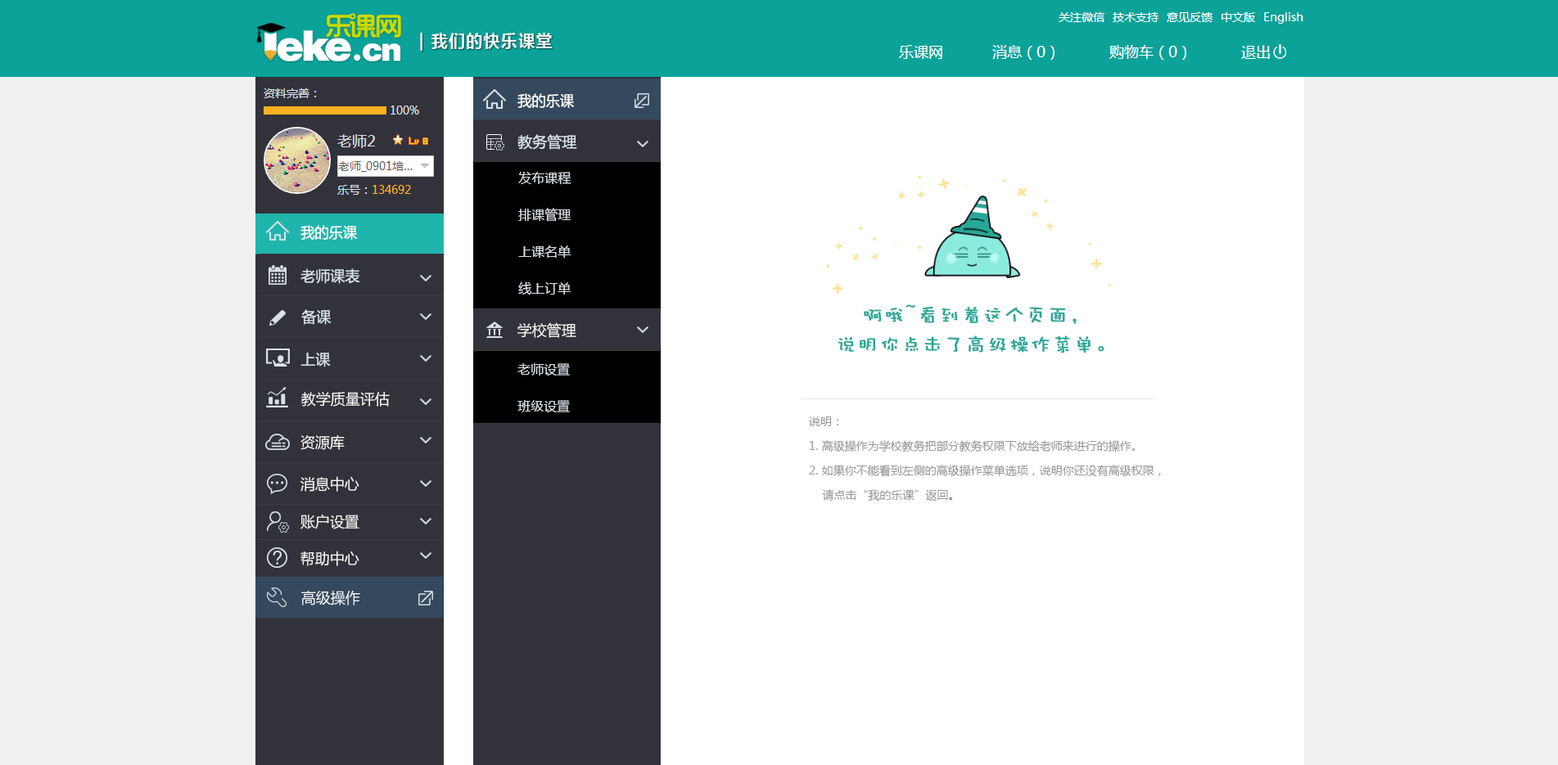
<style>
.page{position:relative;width:1558px;height:765px;background:#ffffff}
.page>*{position:absolute;margin:0}
.t1{font:14.7px "MicrosoftYaHei";color:#ffffff;scale:0.96 1}
.t2{font:14.7px "MicrosoftYaHei";color:#d9e1e8}
.t3{font:13.1px/36.8px "MicrosoftYaHei";color:#d9e1e8}
.t4{font:19.6px/29.5px "DFWaWaW5";letter-spacing:0.075em;color:#2aa798;font-weight:bold}
.t5{font:14.7px "MicrosoftYaHei";color:#fafafa}
.t6{font:11.5px/24.6px "MicrosoftYaHei";color:#999999}
.t7{font:11.5px/24.6px "MicrosoftYaHei";color:#666666}
</style>
<div class="page">
<p class="t1" style="left:517px;top:93px;width:57px;height:15px">我的乐课</p>
<p class="t2" style="left:517px;top:134px;width:60px;height:16px">教务管理</p>
<p class="t3" style="left:518px;top:172px;width:53px;height:123px">发布课程<br>排课管理<br>上课名单<br>线上订单</p>
<p class="t1" style="left:300px;top:225px;width:57px;height:15px">我的乐课</p>
<p class="t2" style="left:300px;top:269px;width:60px;height:15px">老师课表</p>
<p class="t4" style="left:837px;top:305px;width:267px;height:49px;text-align:center">啊哦~看到着这个页面，<br>说明你点击了高级操作菜单。</p>
<p class="t2" style="left:301px;top:309px;width:31px;height:16px">备课</p>
<p class="t5" style="left:517px;top:323px;width:59px;height:15px">学校管理</p>
<p class="t2" style="left:300px;top:353px;width:31px;height:15px">上课</p>
<p class="t3" style="left:517px;top:363px;width:53px;height:50px">老师设置<br>班级设置</p>
<p class="t5" style="left:301px;top:392px;width:89px;height:15px">教学质量评估</p>
<p class="t6" style="left:809px;top:417px;width:352px;height:85px">说明：<br>1. 高级操作为学校教务把部分教务权限下放给老师来进行的操作。<br>2. 如果你不能看到左侧的高级操作菜单选项，说明你还没有高级权限，<br>    请点击“我的乐课”返回<span class="t7">。</span></p>
<p class="t5" style="left:300px;top:435px;width:45px;height:15px">资源库</p>
<p class="t5" style="left:300px;top:476px;width:59px;height:16px">消息中心</p>
<p class="t5" style="left:300px;top:514px;width:59px;height:16px">账户设置</p>
<p class="t5" style="left:300px;top:551px;width:59px;height:15px">帮助中心</p>
<p class="t5" style="left:301px;top:591px;width:59px;height:15px">高级操作</p>
</div>
